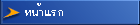
<style>
.page{position:relative;width:140px;height:25px}
.page>*{position:absolute;margin:0}
.t1{font:15.3px "EucrosiaDSE";color:#ffffff;scale:1.12 1}
</style>
<div class="page">
<p class="t1" style="left:25px;top:3px;width:38px;height:13px">Ë¹éÒáÃ¡</p>
</div>
